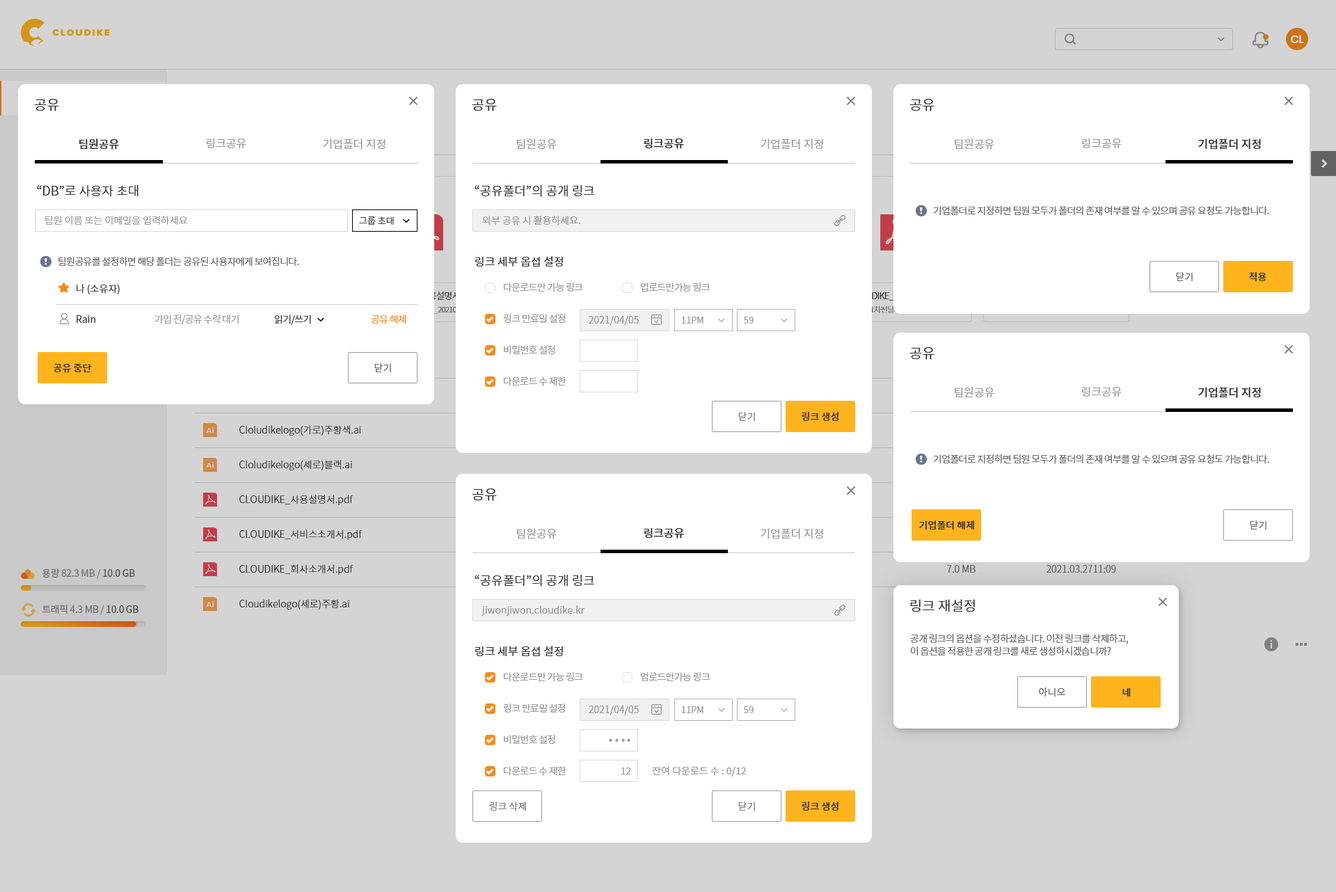
<style>
.page{position:relative;width:1336px;height:892px;background:#ffffff}
.page>*{position:absolute;margin:0}
.t1{font:13.9px "NotoSansCJKkr-DemiLight";color:#333333}
.t2{font:11.1px "NotoSansCJKkr-Medium";color:#333333}
.t3{font:11.1px "NotoSansCJKkr-DemiLight";color:#999999}
.t4{font:12.5px "NotoSansCJKkr-DemiLight";color:#333333}
.t5{font:9.7px "NotoSansCJKkr-DemiLight";letter-spacing:-0.05em;color:#666666}
.t6{font:9.7px "NotoSansCJKkr-DemiLight";color:#999999}
.t7{font:9px "NotoSansCJKkr-DemiLight";color:#333333}
.t8{font:11.1px "NotoSansCJKkr-Regular";color:#333333}
.t9{font:9.7px "NotoSansCJKkr-Regular";color:#666666}
.t10{font:9.7px "NotoSansCJKkr-Medium";color:#333333}
.t11{font:9.7px "NotoSansCJKkr-DemiLight";color:#333333}
.t12{font:9.7px "NotoSansCJKkr-Regular";letter-spacing:-0.05em;color:#999999}
.t13{font:9.7px "NotoSansCJKkr-DemiLight";letter-spacing:-0.05em;color:#999999}
.t14{font:9.7px "NotoSansCJKkr-DemiLight";letter-spacing:-0.05em;color:#333333}
.t15{font:9.7px "NotoSansCJKkr-DemiLight";letter-spacing:-0.05em;color:#f98a17}
.t16{font:9px "NotoSansCJKkr-DemiLight";color:#999999}
.t17{font:9.7px "NotoSansCJKkr-Regular";color:#7b7b7b}
.t18{font:9.7px/12.5px "NotoSansCJKkr-DemiLight";letter-spacing:-0.05em;color:#666666}
.t19{font:23px "NotoSansCJKkr-DemiLight";color:#999999}
.t20{font:9.7px "NotoSansCJKkr-Regular";color:#999999}
</style>
<div class="page">
<p class="t1" style="left:34px;top:99px;width:25px;height:12px">공유</p>
<p class="t1" style="left:472px;top:99px;width:25px;height:12px">공유</p>
<p class="t1" style="left:910px;top:99px;width:25px;height:12px">공유</p>
<p class="t2" style="left:79px;top:139px;width:40px;height:11px">팀원공유</p>
<p class="t3" style="left:207px;top:139px;width:39px;height:10px">링크공유</p>
<p class="t3" style="left:323px;top:139px;width:63px;height:11px">기업폴더 지정</p>
<p class="t3" style="left:517px;top:139px;width:40px;height:11px">팀원공유</p>
<p class="t2" style="left:645px;top:139px;width:39px;height:10px">링크공유</p>
<p class="t3" style="left:761px;top:139px;width:62px;height:11px">기업폴더 지정</p>
<p class="t3" style="left:955px;top:139px;width:40px;height:11px">팀원공유</p>
<p class="t3" style="left:1082px;top:139px;width:40px;height:10px">링크공유</p>
<p class="t2" style="left:1199px;top:139px;width:62px;height:11px">기업폴더 지정</p>
<p class="t4" style="left:37px;top:185px;width:102px;height:12px">“DB”로 사용자 초대</p>
<p class="t4" style="left:475px;top:184px;width:119px;height:13px">“공유폴더”의 공개 링크</p>
<p class="t5" style="left:933px;top:206px;width:337px;height:10px">기업폴더로 지정하면 팀원 모두가 폴더의 존재 여부를 알 수 있으며 공유 요청도 가능합니다.</p>
<p class="t6" style="left:45px;top:216px;width:143px;height:10px">팀원 이름 또는 이메일을 입력하세요</p>
<p class="t7" style="left:359px;top:216px;width:35px;height:9px">그룹 초대</p>
<p class="t6" style="left:482px;top:216px;width:98px;height:10px">외부 공유 시 활용하세요.</p>
<p class="t5" style="left:58px;top:257px;width:241px;height:10px">팀원공유를 설정하면 해당 폴더는 공유된 사용자에게 보여집니다.</p>
<p class="t8" style="left:475px;top:256px;width:88px;height:11px">링크 세부 옵셥 설정</p>
<p class="t9" style="left:1176px;top:272px;width:17px;height:10px">닫기</p>
<p class="t10" style="left:1249px;top:272px;width:18px;height:10px">적용</p>
<p class="t11" style="left:77px;top:284px;width:43px;height:10px">나 (소유자)</p>
<p class="t12" style="left:504px;top:283px;width:79px;height:9px">다운로드만 가능 링크</p>
<p class="t12" style="left:640px;top:283px;width:70px;height:9px">업로드만가능 링크</p>
<p class="t11" style="left:77px;top:315px;width:18px;height:8px">Rain</p>
<p class="t13" style="left:155px;top:315px;width:84px;height:10px">가입 전/공유 수락 대기</p>
<p class="t14" style="left:274px;top:315px;width:37px;height:10px">읽기/쓰기</p>
<p class="t15" style="left:371px;top:315px;width:35px;height:9px">공유 해제</p>
<p class="t12" style="left:504px;top:314px;width:61px;height:9px">링크 만료일 설정</p>
<p class="t6" style="left:589px;top:316px;width:50px;height:10px">2021/04/05</p>
<p class="t16" style="left:681px;top:317px;width:23px;height:7px">11PM</p>
<p class="t16" style="left:744px;top:317px;width:10px;height:7px">59</p>
<p class="t12" style="left:504px;top:345px;width:51px;height:9px">비밀번호 설정</p>
<p class="t1" style="left:910px;top:347px;width:25px;height:13px">공유</p>
<p class="t10" style="left:54px;top:364px;width:38px;height:9px">공유 중단</p>
<p class="t9" style="left:374px;top:363px;width:17px;height:10px">닫기</p>
<p class="t12" style="left:504px;top:377px;width:63px;height:9px">다운로드 수 제한</p>
<p class="t3" style="left:955px;top:387px;width:40px;height:11px">팀원공유</p>
<p class="t3" style="left:1082px;top:387px;width:40px;height:10px">링크공유</p>
<p class="t2" style="left:1199px;top:387px;width:62px;height:11px">기업폴더 지정</p>
<p class="t17" style="left:738px;top:412px;width:17px;height:10px">닫기</p>
<p class="t10" style="left:802px;top:412px;width:37px;height:9px">링크 생성</p>
<p class="t5" style="left:933px;top:455px;width:337px;height:9px">기업폴더로 지정하면 팀원 모두가 폴더의 존재 여부를 알 수 있으며 공유 요청도 가능합니다.</p>
<p class="t1" style="left:472px;top:489px;width:25px;height:12px">공유</p>
<p class="t10" style="left:919px;top:521px;width:55px;height:9px">기업폴더 해제</p>
<p class="t9" style="left:1250px;top:521px;width:17px;height:9px">닫기</p>
<p class="t3" style="left:517px;top:528px;width:40px;height:11px">팀원공유</p>
<p class="t2" style="left:645px;top:528px;width:39px;height:11px">링크공유</p>
<p class="t3" style="left:761px;top:528px;width:62px;height:11px">기업폴더 지정</p>
<p class="t4" style="left:475px;top:574px;width:119px;height:13px">“공유폴더”의 공개 링크</p>
<p class="t6" style="left:482px;top:606px;width:103px;height:10px">jiwonjiwon.cloudike.kr</p>
<p class="t1" style="left:910px;top:599px;width:65px;height:13px">링크 재설정</p>
<p class="t18" style="left:910px;top:634px;width:218px;height:22px">공개 링크의 옵션을 수정하셨습니다. 이전 링크를 삭제하고, <br>이 옵션을 적용한 공개 링크를 새로 생성하시겠습니까?</p>
<p class="t8" style="left:475px;top:646px;width:88px;height:10px">링크 세부 옵셥 설정</p>
<p class="t12" style="left:504px;top:672px;width:79px;height:10px">다운로드만 가능 링크</p>
<p class="t12" style="left:640px;top:672px;width:70px;height:10px">업로드만가능 링크</p>
<p class="t9" style="left:1039px;top:688px;width:27px;height:9px">아니오</p>
<p class="t10" style="left:1123px;top:688px;width:8px;height:9px">네</p>
<p class="t12" style="left:504px;top:704px;width:61px;height:9px">링크 만료일 설정</p>
<p class="t6" style="left:589px;top:706px;width:50px;height:10px">2021/04/05</p>
<p class="t16" style="left:681px;top:706px;width:23px;height:7px">11PM</p>
<p class="t16" style="left:744px;top:706px;width:10px;height:7px">59</p>
<p class="t12" style="left:504px;top:735px;width:51px;height:9px">비밀번호 설정</p>
<p class="t19" style="left:609px;top:738px;width:22px;height:4px">....</p>
<p class="t12" style="left:504px;top:766px;width:63px;height:10px">다운로드 수 제한</p>
<p class="t6" style="left:621px;top:768px;width:10px;height:7px">12</p>
<p class="t20" style="left:652px;top:766px;width:94px;height:11px">잔여 다운로드 수 : 0/12</p>
<p class="t17" style="left:489px;top:802px;width:37px;height:10px">링크 삭제</p>
<p class="t17" style="left:738px;top:802px;width:17px;height:10px">닫기</p>
<p class="t10" style="left:802px;top:802px;width:37px;height:9px">링크 생성</p>
</div>
